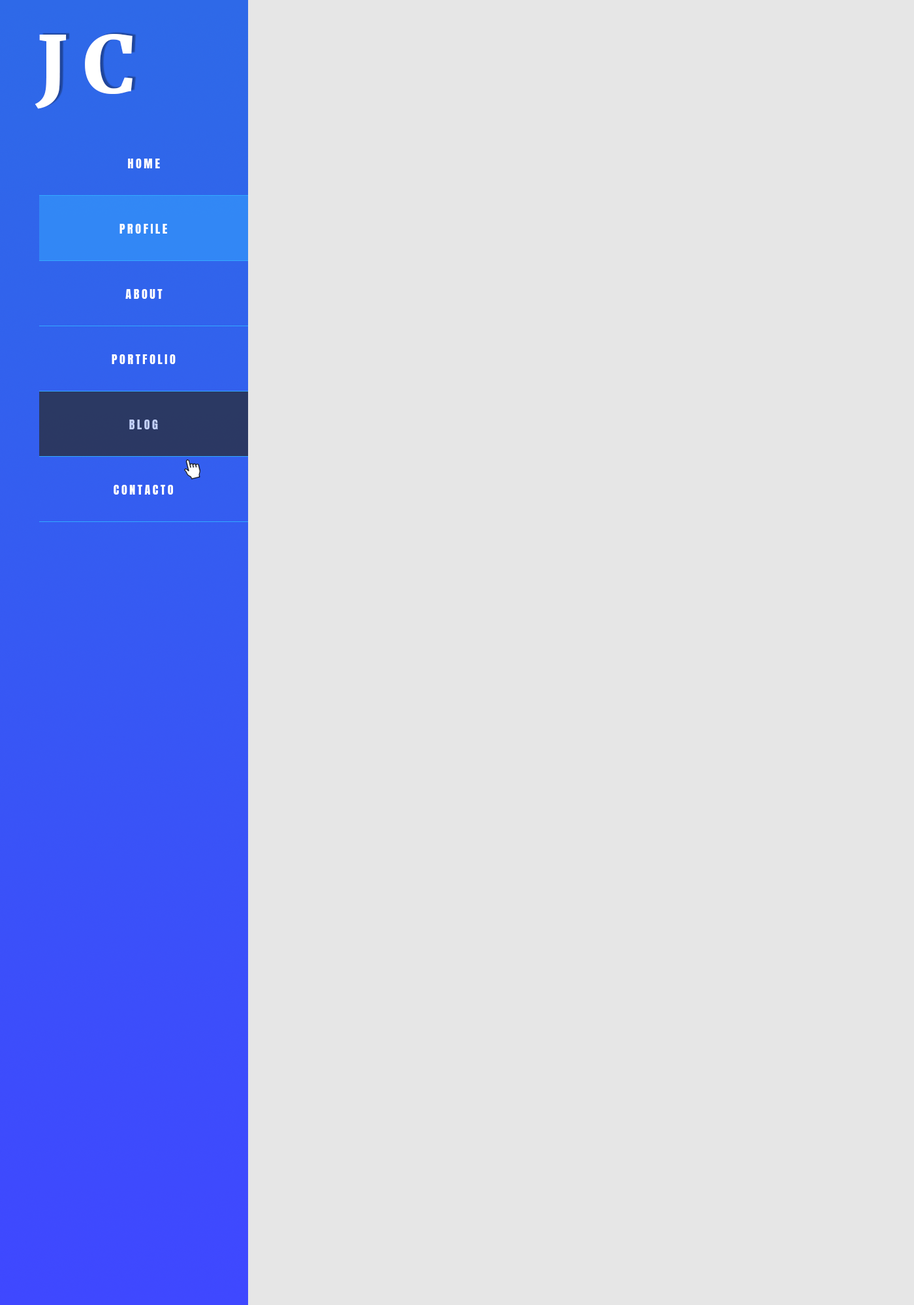
<style>
.page{position:relative;width:914px;height:1305px;background:#e6e6e6}
.page>*{position:absolute;margin:0}
.t1{font:78.3px "Merriweather-Black";letter-spacing:0.2em;color:#ffffff;text-transform:uppercase}
.t2{font:11.7px "Anton-Regular";letter-spacing:0.2em;color:#ffffff;text-transform:uppercase}
.t3{font:11.7px "Anton-Regular";letter-spacing:0.2em;color:#c2d0fa;text-transform:uppercase}
</style>
<div class="page">
<p class="t1" style="left:35px;top:34px;width:97px;height:75px">JC</p>
<p class="t2" style="left:128px;top:159px;width:32px;height:9px">HOME</p>
<p class="t2" style="left:119px;top:224px;width:48px;height:10px">PROFILE</p>
<p class="t2" style="left:125px;top:289px;width:37px;height:10px">ABOUT</p>
<p class="t2" style="left:112px;top:354px;width:64px;height:10px">PORTFOLIO</p>
<p class="t3" style="left:129px;top:420px;width:29px;height:9px">BLOG</p>
<p class="t2" style="left:114px;top:485px;width:59px;height:10px">contacto</p>
</div>
